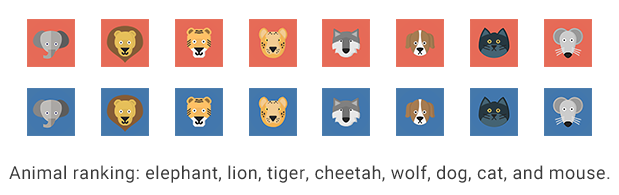
<style>
.page{position:relative;width:619px;height:195px;background:#ffffff}
.page>*{position:absolute;margin:0}
.t1{font:18px "Roboto-Regular";letter-spacing:0.027em;color:#3a3a3a}
</style>
<div class="page">
<p class="t1" style="left:9px;top:165px;width:601px;height:18px">Animal ranking: elephant, lion, tiger, cheetah, wolf, dog, cat, and mouse.</p>
</div>
